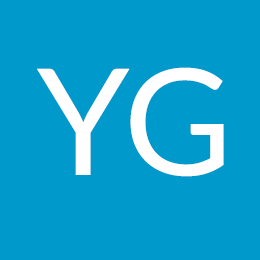
<style>
.page{position:relative;width:260px;height:260px;background:#0099cc}
.page>*{position:absolute;margin:0}
.t1{font:148px "Lato-Regular";color:#ffffff}
</style>
<div class="page">
<p class="t1" style="left:37px;top:67px;width:187px;height:110px">YG</p>
</div>
